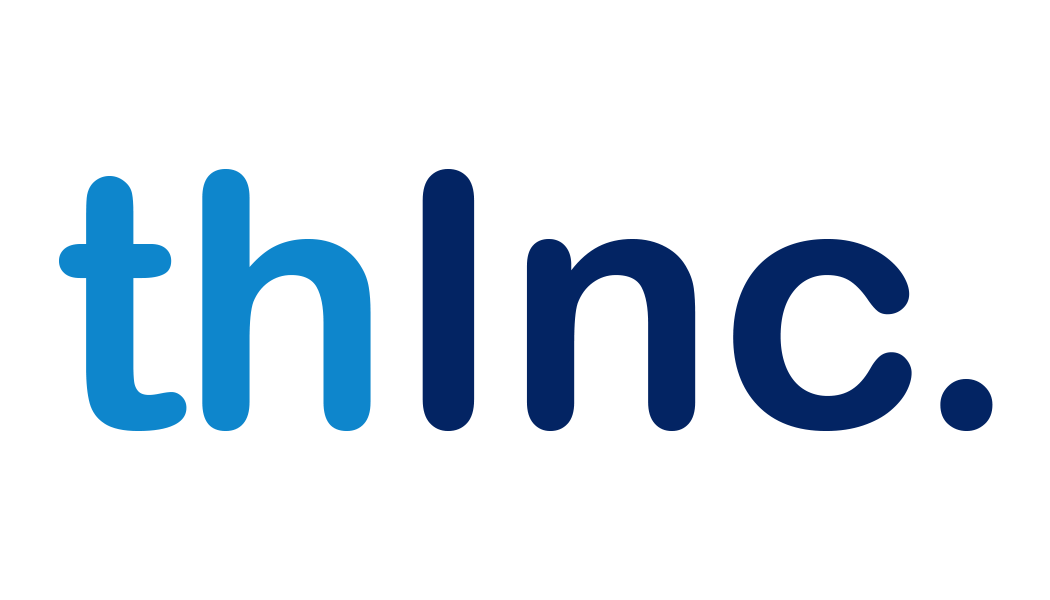
<style>
.page{position:relative;width:1050px;height:600px;background:#ffffff}
.page>*{position:absolute;margin:0}
.t1{font:354.2px "ArialRoundedMTBold";color:#032463}
.t2{font:354.2px "ArialRoundedMTBold";color:#0e86cc}
</style>
<div class="page">
<p class="t1" style="left:59px;top:169px;width:934px;height:262px"><span class="t2">th</span>Inc.</p>
</div>
